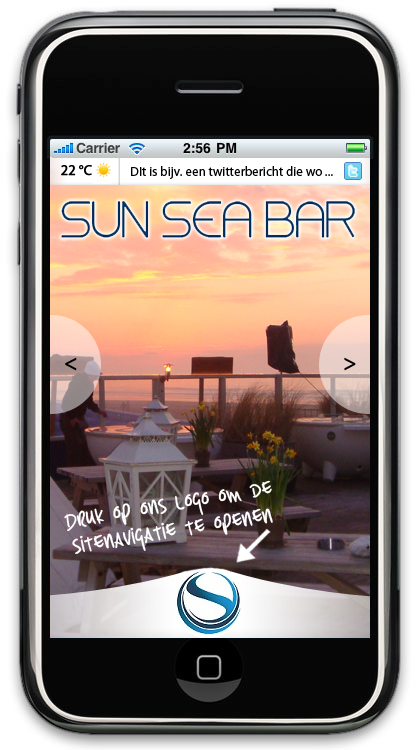
<style>
.page{position:relative;width:420px;height:750px}
.page>*{position:absolute;margin:0}
.t1{font:14px "MyriadPro-Regular";color:#000000;font-weight:bold}
.t2{font:13px "MyriadPro-Regular";color:#000000}
.t3{font:22px "MyriadPro-Regular";color:#000000;font-weight:bold}
.t4{font:22px "DKEarlyMorningCoffee-MediumRoas";color:#ffffff;font-weight:bold}
</style>
<div class="page">
<p class="t1" style="left:61px;top:165px;width:31px;height:11px">22 °C</p>
<p class="t2" style="left:131px;top:166px;width:202px;height:13px">DIt is bijv. een twitterbericht die wo ...</p>
<p class="t3" style="left:65px;top:357px;width:12px;height:14px">&lt;</p>
<p class="t3" style="left:344px;top:357px;width:12px;height:14px">&gt;</p>
<p class="t4" style="left:64px;top:480px;width:209px;height:74px;rotate:-9deg">Druk op ons logo om de sitenavigatie te openen</p>
</div>
